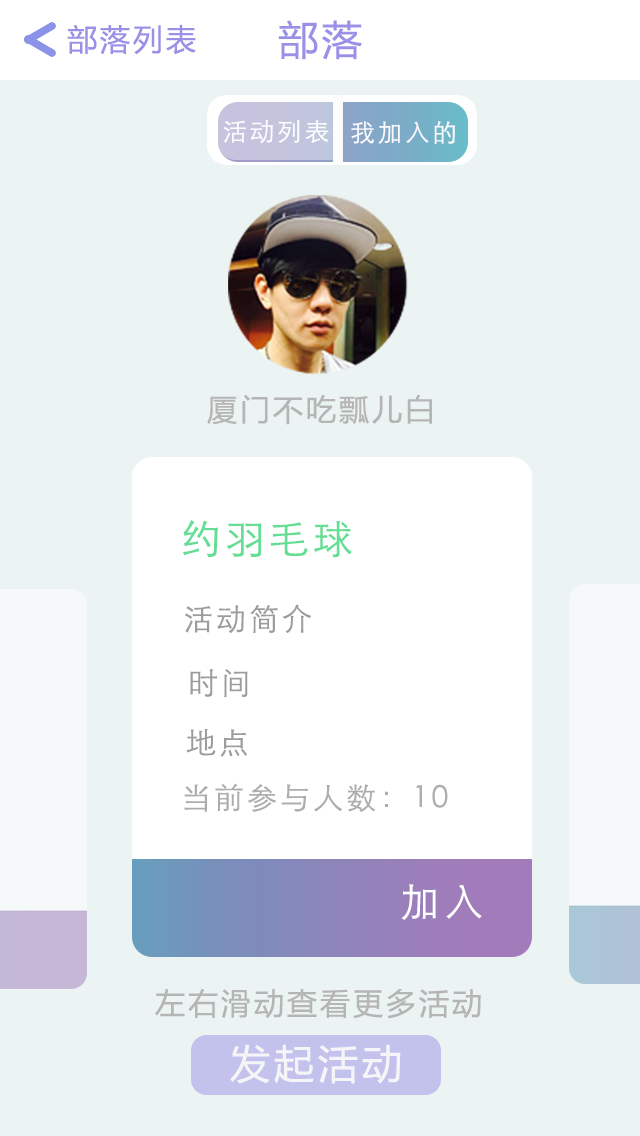
<style>
.page{position:relative;width:640px;height:1136px;background:#ebf3f3}
.page>*{position:absolute;margin:0}
.t1{font:30px "MicrosoftYaHei";letter-spacing:0.1em;color:#9991e8}
.t2{font:40px "MicrosoftYaHei";letter-spacing:0.1em;color:#9991e8}
.t3{font:25px "STXihei";letter-spacing:0.1em;color:#fafafe}
.t4{font:30px "MicrosoftYaHei";letter-spacing:0.1em;color:#b5b5b5}
.t5{font:40px "STXihei";letter-spacing:0.1em;color:#63de94}
.t6{font:30px "STXihei";letter-spacing:0.1em;color:#9d9c9c}
.t7{font:30px "STXihei";letter-spacing:0.1em;color:#aeadad}
.t8{font:40px "STXihei";letter-spacing:0.1em;color:#ffffff}
.t9{font:40px "MicrosoftYaHei";letter-spacing:0.1em;color:#f5f5f8}
</style>
<div class="page">
<p class="t1" style="left:67px;top:24px;width:129px;height:31px">部落列表</p>
<p class="t2" style="left:278px;top:20px;width:84px;height:40px">部落</p>
<p class="t3" style="left:223px;top:119px;width:106px;height:25px">活动列表</p>
<p class="t3" style="left:351px;top:121px;width:104px;height:23px">我加入的</p>
<p class="t4" style="left:207px;top:394px;width:225px;height:31px">厦门不吃瓢儿白</p>
<p class="t5" style="left:183px;top:520px;width:169px;height:38px">约羽毛球</p>
<p class="t6" style="left:185px;top:604px;width:127px;height:29px">活动简介</p>
<p class="t6" style="left:190px;top:669px;width:58px;height:28px">时间</p>
<p class="t6" style="left:186px;top:729px;width:61px;height:28px">地点</p>
<p class="t7" style="left:184px;top:783px;width:264px;height:29px">当前参与人数：10</p>
<p class="t8" style="left:401px;top:884px;width:81px;height:36px">加入</p>
<p class="t4" style="left:155px;top:988px;width:326px;height:31px">左右滑动查看更多活动</p>
<p class="t9" style="left:230px;top:1044px;width:171px;height:40px">发起活动</p>
</div>
